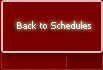
<style>
.page{position:relative;width:103px;height:70px;background:#7a0001}
.page>*{position:absolute;margin:0}
.t1{font:9px "Tahoma";color:#ffffff}
</style>
<div class="page">
<p class="t1" style="left:17px;top:21px;width:74px;height:8px">Back to Schedules</p>
</div>
